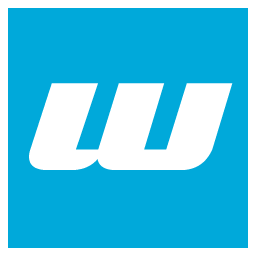
<style>
.page{position:relative;width:256px;height:256px;background:#00a9da}
.page>*{position:absolute;margin:0}
.t1{font:261px "Magneto-Bold";letter-spacing:-0.05em;color:#ffffff}
</style>
<div class="page">
<p class="t1" style="left:29px;top:83px;width:204px;height:87px">w</p>
</div>
